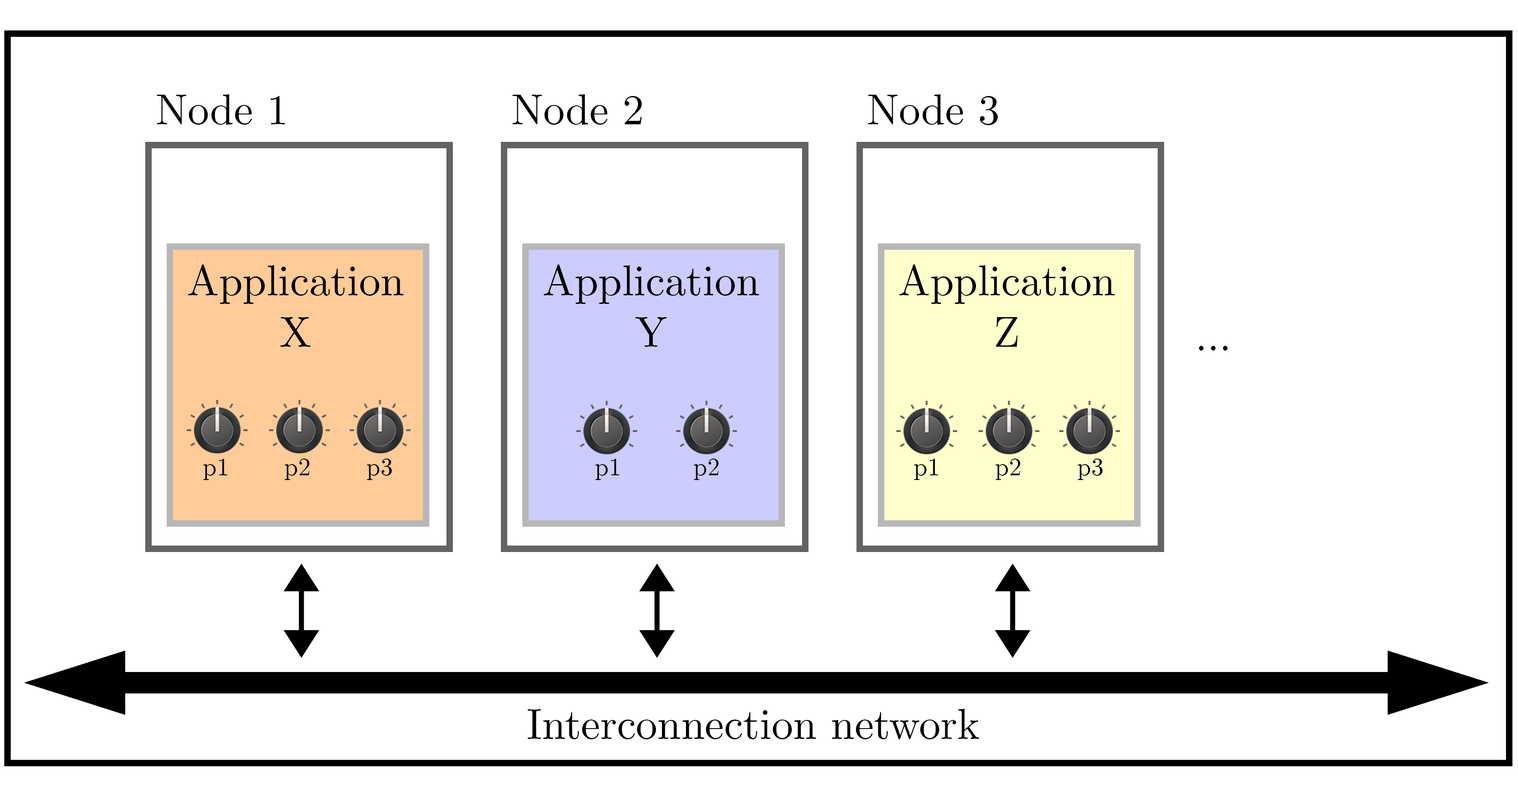
<style>
.page{position:relative;width:1518px;height:786px;background:#ffffff}
.page>*{position:absolute;margin:0}
.t1{font:42.8px "CMUSerif-Roman";color:#000000}
.t2{font:25px "CMUSerif-Roman";color:#000000}
</style>
<div class="page">
<p class="t1" style="left:157px;top:94px;width:128px;height:31px">Node 1</p>
<p class="t1" style="left:512px;top:94px;width:130px;height:31px">Node 2</p>
<p class="t1" style="left:868px;top:94px;width:130px;height:31px">Node 3</p>
<p class="t1" style="left:188px;top:264px;width:216px;height:83px;text-align:center">Application<br>X</p>
<p class="t1" style="left:544px;top:264px;width:215px;height:83px;text-align:center">Application<br>Y</p>
<p class="t1" style="left:899px;top:264px;width:216px;height:83px;text-align:center">Application<br>Z</p>
<p class="t1" style="left:1199px;top:346px;width:28px;height:4px">...</p>
<p class="t2" style="left:203px;top:458px;width:24px;height:22px">p1</p>
<p class="t2" style="left:284px;top:458px;width:26px;height:22px">p2</p>
<p class="t2" style="left:367px;top:458px;width:25px;height:22px">p3</p>
<p class="t2" style="left:595px;top:458px;width:24px;height:22px">p1</p>
<p class="t2" style="left:694px;top:458px;width:25px;height:22px">p2</p>
<p class="t2" style="left:914px;top:458px;width:24px;height:22px">p1</p>
<p class="t2" style="left:995px;top:458px;width:25px;height:22px">p2</p>
<p class="t2" style="left:1077px;top:458px;width:26px;height:22px">p3</p>
<p class="t1" style="left:527px;top:709px;width:452px;height:30px">Interconnection network</p>
</div>
